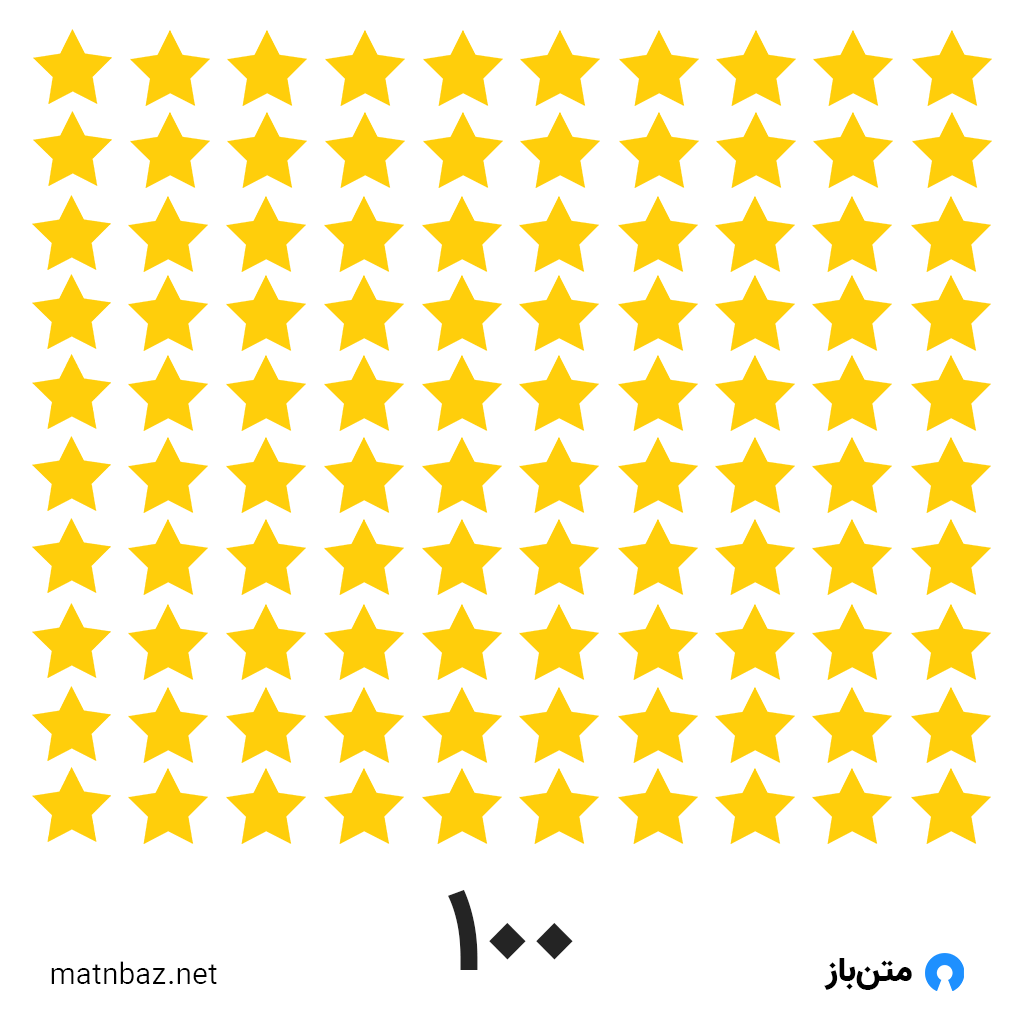
<style>
.page{position:relative;width:1024px;height:1024px;background:#ffffff}
.page>*{position:absolute;margin:0}
.t1{font:120px "Vazir-Black";color:#242424}
.t2{font:30px "Vazir-Light";color:#000000}
.t3{font:34.2px "Vazir-Black";color:#000000}
</style>
<div class="page">
<p class="t1" style="left:448px;top:889px;width:125px;height:81px">100</p>
<p class="t2" style="left:51px;top:961px;width:166px;height:23px">matnbaz.net</p>
<p class="t3" style="left:824px;top:958px;width:88px;height:32px">متن‌باز</p>
</div>
